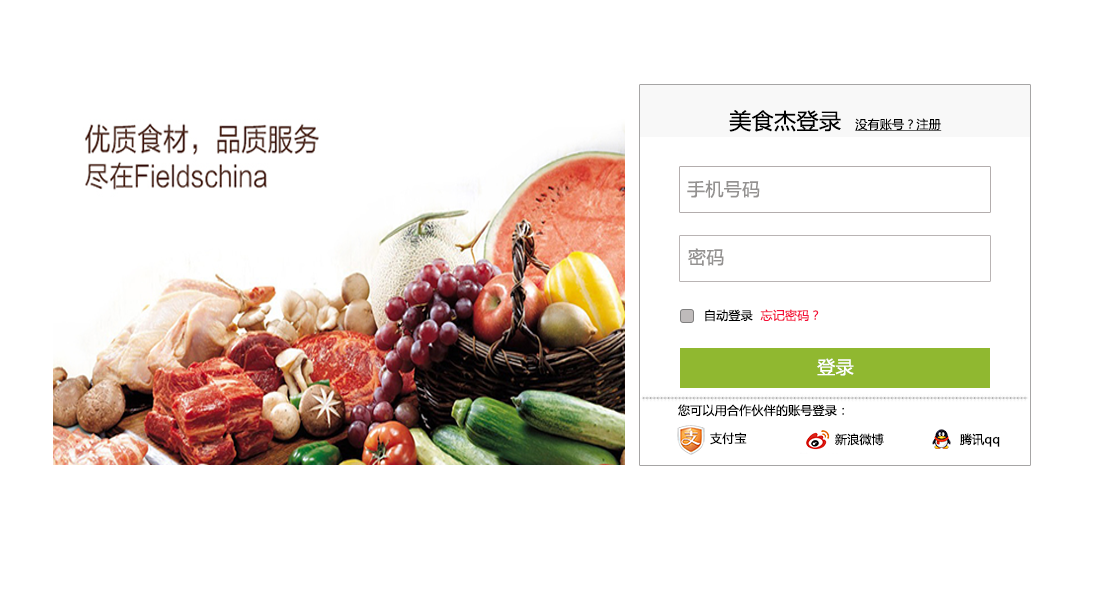
<style>
.page{position:relative;width:1100px;height:600px;background:#ffffff}
.page>*{position:absolute;margin:0}
.t1{font:12px "MicrosoftYaHei";letter-spacing:0.02em;color:#000000;text-decoration:underline}
.t2{font:22px "MicrosoftYaHei";letter-spacing:0.02em;color:#000000}
.t3{font:18px "MicrosoftYaHei";letter-spacing:0.02em;color:#949291}
.t4{font:12px "MicrosoftYaHei";letter-spacing:0.02em;color:#f40d39}
.t5{font:12px "MicrosoftYaHei";letter-spacing:0.02em;color:#000000}
.t6{font:18px "MicrosoftYaHei";letter-spacing:0.02em;color:#ffffff}
</style>
<div class="page">
<p class="t1" style="left:729px;top:110px;width:213px;height:22px"><span class="t2">美食杰登录  </span>没有账号？注册</p>
<p class="t3" style="left:687px;top:180px;width:73px;height:18px">手机号码</p>
<p class="t3" style="left:688px;top:248px;width:36px;height:18px">密码</p>
<p class="t4" style="left:705px;top:309px;width:114px;height:13px"><span class="t5">自动登录  </span>忘记密码？</p>
<p class="t6" style="left:817px;top:358px;width:37px;height:18px">登录</p>
<p class="t5" style="left:678px;top:404px;width:166px;height:13px">您可以用合作伙伴的账号登录：</p>
<p class="t5" style="left:710px;top:432px;width:37px;height:13px">支付宝</p>
<p class="t5" style="left:835px;top:433px;width:49px;height:13px">新浪微博</p>
<p class="t5" style="left:960px;top:433px;width:40px;height:14px">腾讯qq</p>
</div>
